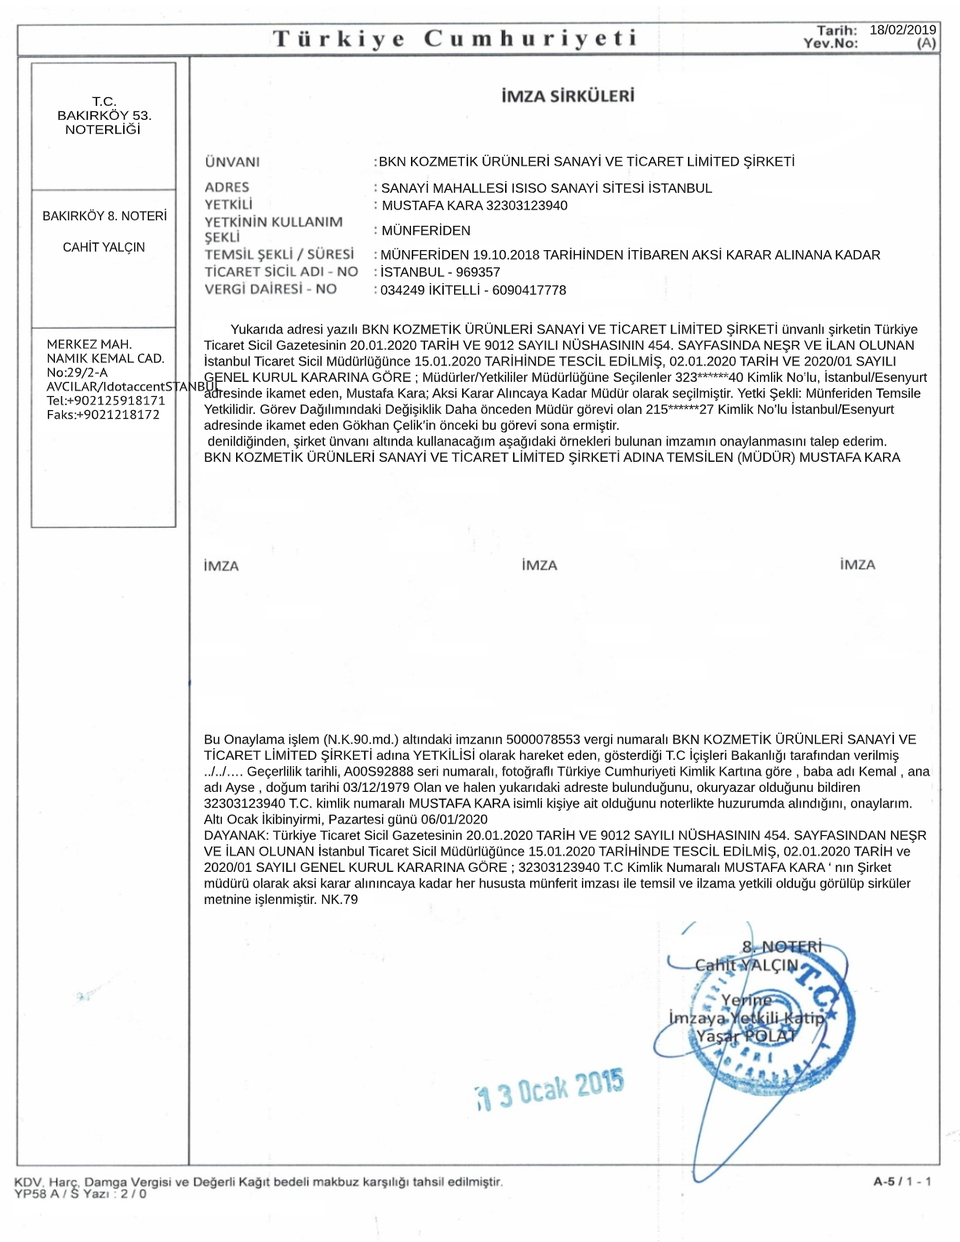
<style>
.page{position:relative;width:960px;height:1242px;background:#fefefe}
.page>*{position:absolute;margin:0}
.t1{font:13.3px "ArialMT";color:#000000}
.t2{font:12.6px/14.1px "ArialMT";color:#000000;scale:1.11 1}
.t3{font:12.6px "ArialMT";color:#000000;scale:1.11 1}
.t4{font:13px "ArialMT";color:#000000;scale:0.94 1}
</style>
<div class="page">
<p class="t1" style="left:871px;top:24px;width:65px;height:11px">18/02/2019</p>
<p class="t2" style="left:58px;top:96px;width:93px;height:38px"><span class="t3">         T.C.</span><br>BAKIRKÖY 53.<br>  NOTERLİĞİ</p>
<p class="t1" style="left:380px;top:154px;width:414px;height:15px">BKN KOZMETİK ÜRÜNLERİ SANAYİ VE TİCARET LİMİTED ŞİRKETİ</p>
<p class="t1" style="left:381px;top:180px;width:331px;height:13px">SANAYİ MAHALLESİ ISISO SANAYİ SİTESİ İSTANBUL</p>
<p class="t4" style="left:43px;top:209px;width:123px;height:12px">BAKIRKÖY 8. NOTERİ</p>
<p class="t1" style="left:383px;top:200px;width:185px;height:10px">MUSTAFA KARA 32303123940</p>
<p class="t1" style="left:383px;top:223px;width:87px;height:12px">MÜNFERİDEN</p>
<p class="t4" style="left:63px;top:240px;width:81px;height:15px">CAHİT YALÇIN</p>
<p class="t1" style="left:381px;top:247px;width:500px;height:13px">MÜNFERİDEN 19.10.2018 TARİHİNDEN İTİBAREN AKSİ KARAR ALINANA KADAR</p>
<p class="t1" style="left:381px;top:264px;width:119px;height:13px">İSTANBUL - 969357</p>
<p class="t1" style="left:380px;top:282px;width:186px;height:13px">034249 İKİTELLİ - 6090417778</p>
<p class="t1" style="left:204px;top:322px;width:724px;height:143px">Yukarıda adresi yazılı BKN KOZMETİK ÜRÜNLERİ SANAYİ VE TİCARET LİMİTED ŞİRKETİ ünvanlı şirketin Türkiye Ticaret Sicil Gazetesinin 20.01.2020 TARİH VE 9012 SAYILI NÜSHASININ 454. SAYFASINDA NEŞR VE İLAN OLUNAN İstanbul Ticaret Sicil Müdürlüğünce 15.01.2020 TARİHİNDE TESCİL EDİLMİŞ, 02.01.2020 TARİH VE 2020/01 SAYILI GENEL KURUL KARARINA GÖRE ; Müdürler/Yetkililer Müdürlüğüne Seçilenler 323******40 Kimlik No’lu, İstanbul/Esenyurt adresinde ikamet eden, Mustafa Kara; Aksi Karar Alıncaya Kadar Müdür olarak seçilmiştir. Yetki Şekli: Münferiden Temsile Yetkilidir. Görev Dağılımındaki Değişiklik Daha önceden Müdür görevi olan 215******27 Kimlik No’lu İstanbul/Esenyurt adresinde ikamet eden Gökhan Çelik’in önceki bu görevi sona ermiştir.<br> denildiğinden, şirket ünvanı altında kullanacağım aşağıdaki örnekleri bulunan imzamın onaylanmasını talep ederim.<br>BKN KOZMETİK ÜRÜNLERİ SANAYİ VE TİCARET LİMİTED ŞİRKETİ ADINA TEMSİLEN (MÜDÜR) MUSTAFA KARA</p>
<p class="t1" style="left:204px;top:732px;width:726px;height:175px">Bu Onaylama işlem (N.K.90.md.) altındaki imzanın 5000078553 vergi numaralı BKN KOZMETİK ÜRÜNLERİ SANAYİ VE TİCARET LİMİTED ŞİRKETİ adına YETKİLİSİ olarak hareket eden, gösterdiği T.C İçişleri Bakanlığı tarafından verilmiş ../../…. Geçerlilik tarihli, A00S92888 seri numaralı, fotoğraflı Türkiye Cumhuriyeti Kimlik Kartına göre , baba adı Kemal , ana adı Ayse , doğum tarihi 03/12/1979 Olan ve halen yukarıdaki adreste bulunduğunu, okuryazar olduğunu bildiren 32303123940 T.C. kimlik numaralı MUSTAFA KARA isimli kişiye ait olduğunu noterlikte huzurumda alındığını, onaylarım. Altı Ocak İkibinyirmi, Pazartesi günü 06/01/2020<br>DAYANAK: Türkiye Ticaret Sicil Gazetesinin 20.01.2020 TARİH VE 9012 SAYILI NÜSHASININ 454. SAYFASINDAN NEŞR VE İLAN OLUNAN İstanbul Ticaret Sicil Müdürlüğünce 15.01.2020 TARİHİNDE TESCİL EDİLMİŞ, 02.01.2020 TARİH ve 2020/01 SAYILI GENEL KURUL KARARINA GÖRE ; 32303123940 T.C Kimlik Numaralı MUSTAFA KARA ‘ nın Şirket müdürü olarak aksi karar alınıncaya kadar her hususta münferit imzası ile temsil ve ilzama yetkili olduğu görülüp sirküler metnine işlenmiştir. NK.79</p>
</div>
